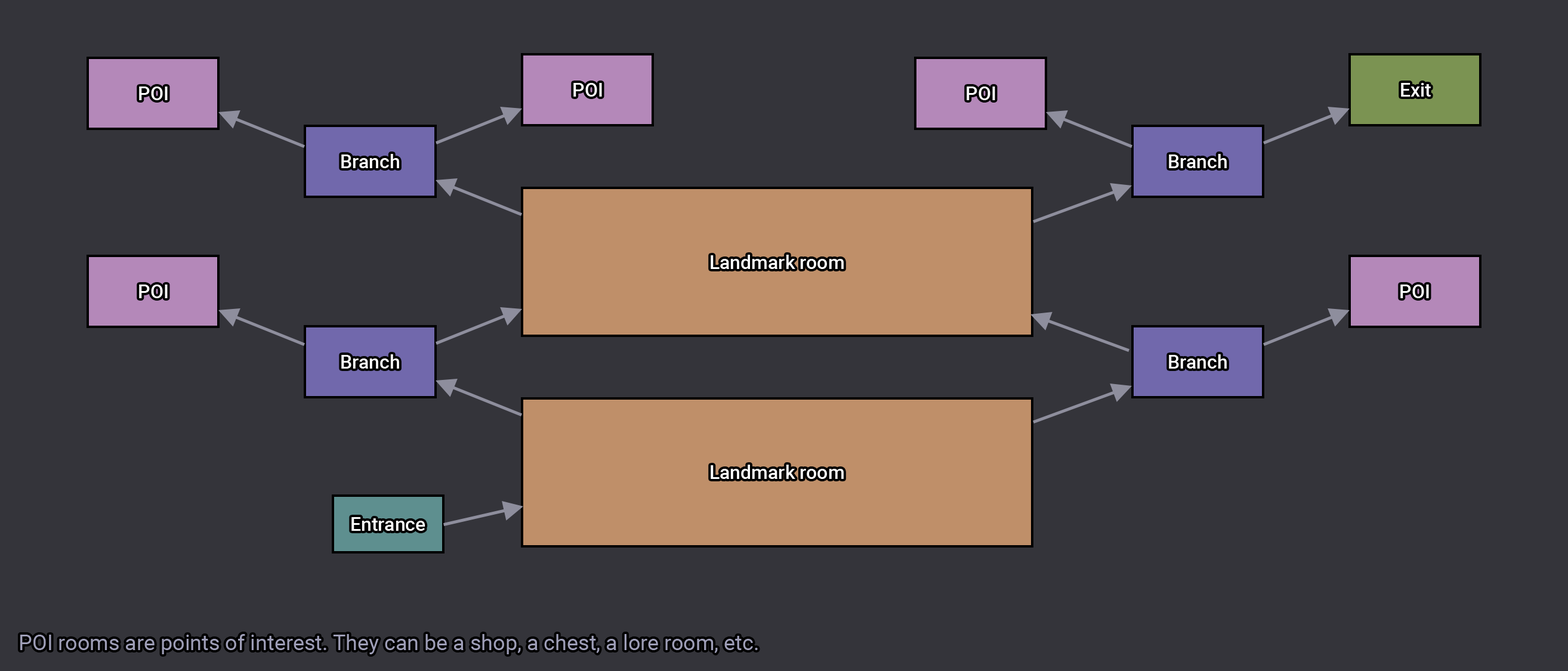
<style>
.page{position:relative;width:1568px;height:671px;background:#34343a}
.page>*{position:absolute;margin:0}
.t1{font:19.1px "Roboto-Medium";color:#ffffff}
.t2{font:21.5px "Roboto-Regular";color:#9e9eb7}
</style>
<div class="page">
<p class="t1" style="left:139px;top:87px;width:29px;height:13px">POI</p>
<p class="t1" style="left:573px;top:83px;width:29px;height:14px">POI</p>
<p class="t1" style="left:967px;top:87px;width:28px;height:13px">POI</p>
<p class="t1" style="left:1401px;top:83px;width:30px;height:14px">Exit</p>
<p class="t1" style="left:341px;top:154px;width:58px;height:14px">Branch</p>
<p class="t1" style="left:1169px;top:154px;width:58px;height:14px">Branch</p>
<p class="t1" style="left:711px;top:255px;width:133px;height:14px">Landmark room</p>
<p class="t1" style="left:139px;top:285px;width:29px;height:13px">POI</p>
<p class="t1" style="left:1400px;top:285px;width:29px;height:13px">POI</p>
<p class="t1" style="left:341px;top:354px;width:58px;height:15px">Branch</p>
<p class="t1" style="left:1169px;top:354px;width:58px;height:15px">Branch</p>
<p class="t1" style="left:711px;top:465px;width:133px;height:14px">Landmark room</p>
<p class="t1" style="left:351px;top:517px;width:74px;height:14px">Entrance</p>
<p class="t2" style="left:20px;top:634px;width:738px;height:21px">POI rooms are points of interest. They can be a shop, a chest, a lore room, etc.</p>
</div>
